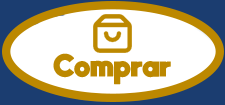
<style>
.page{position:relative;width:225px;height:105px;background:#ffffff}
.page>*{position:absolute;margin:0}
.t1{font:22.4px "moon_get-Heavy";color:#bc8800}
</style>
<div class="page">
<p class="t1" style="left:53px;top:53px;width:118px;height:32px">Comprar</p>
</div>
